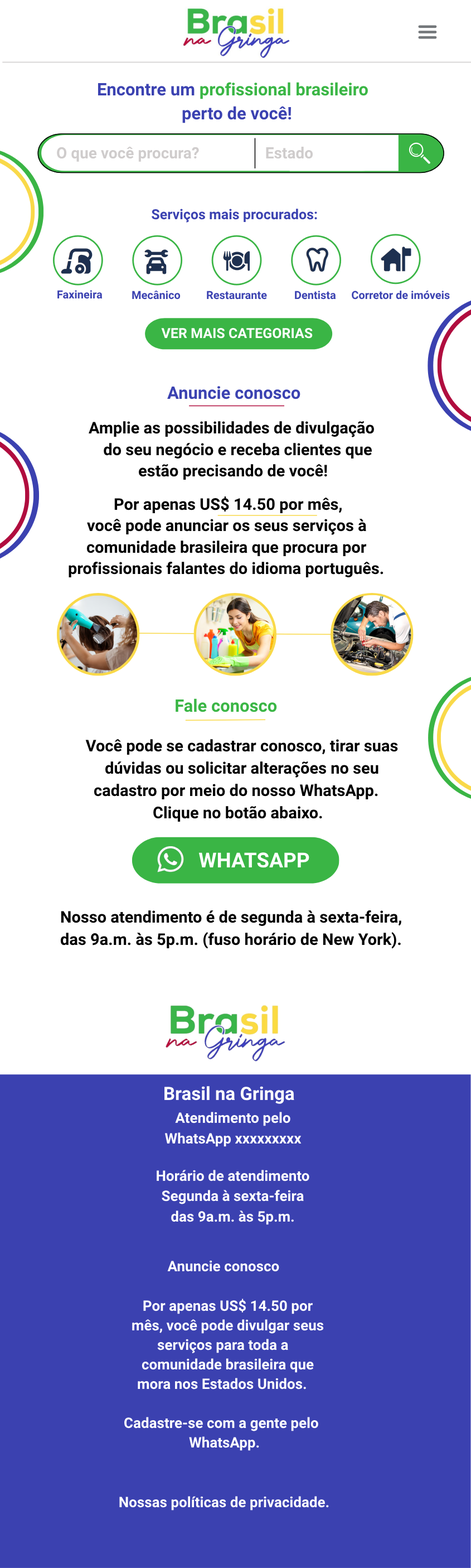
<style>
.page{position:relative;width:471px;height:1568px;background:#ffffff}
.page>*{position:absolute;margin:0}
.t1{font:17.3px/21.4px "Roboto-Bold";color:#3ab645}
.t2{font:17.3px/21.4px "Roboto-Bold";color:#3b42b1}
.t3{font:17.3px/23.9px "Roboto-Bold";color:#3b42b1}
.t4{font:15.6px/23.9px "Roboto-Bold";color:#cfcccc}
.t5{font:15.6px/0.4px "Roboto-Bold";color:#cfcccc}
.t6{font:13.9px "Roboto-Bold";color:#3b42b1}
.t7{font:11.2px "Roboto-Bold";color:#3b42b1}
.t8{font:13.9px "Roboto-Bold";color:#ffffff}
.t9{font:17.3px "Roboto-Bold";color:#3b42b1}
.t10{font:16.2px/21.4px "Roboto-Bold";color:#000000}
.t11{font:16.2px/0.4px "Roboto-Bold";color:#000000}
.t12{font:16.2px "Roboto-Bold";color:#000000}
.t13{font:17.3px "Roboto-Bold";color:#3ab645}
.t14{font:16.2px/22.3px "Roboto-Bold";color:#000000}
.t15{font:20.6px "Roboto-Bold";color:#ffffff}
.t16{font:16.2px/22.1px "Roboto-Bold";color:#000000}
.t17{font:18.4px "Roboto-Bold";color:#ffffff}
.t18{font:14.5px/20.4px "Roboto-Bold";color:#ffffff}
.t19{font:14.5px/22.1px "Roboto-Bold";color:#ffffff}
.t20{font:14.5px "Roboto-Bold";color:#ffffff}
.t21{font:14.5px/19.5px "Roboto-Bold";color:#ffffff}
</style>
<div class="page">
<p class="t1" style="left:98px;top:82px;width:270px;height:41px"><span class="t2">Encontre um </span>profissional brasileiro<span class="t3"><br>perto de você!</span></p>
<p class="t4" style="left:57px;top:147px;width:256px;height:15px">O que você procura?<span class="t5"><br>Estado</span></p>
<p class="t6" style="left:152px;top:209px;width:165px;height:14px">Serviços mais procurados:</p>
<p class="t7" style="left:57px;top:290px;width:46px;height:9px">Faxineira</p>
<p class="t7" style="left:132px;top:291px;width:49px;height:9px">Mecânico</p>
<p class="t7" style="left:207px;top:291px;width:60px;height:9px">Restaurante</p>
<p class="t7" style="left:295px;top:291px;width:41px;height:9px">Dentista</p>
<p class="t7" style="left:352px;top:291px;width:98px;height:9px">Corretor de imóveis</p>
<p class="t8" style="left:161px;top:327px;width:152px;height:12px">VER MAIS CATEGORIAS</p>
<p class="t9" style="left:167px;top:386px;width:134px;height:13px">Anuncie conosco</p>
<p class="t10" style="left:89px;top:421px;width:285px;height:59px"><span class="t11">Amplie as possibilidades de divulgação</span><br>do seu negócio e receba clientes que<br>estão precisando de você!</p>
<p class="t10" style="left:69px;top:496px;width:315px;height:82px"><span class="t12">Por apenas US$ 14.50 por mês, </span><br>você pode anunciar os seus serviços à<br>comunidade brasileira que procura por<br>profissionais falantes do idioma português.</p>
<p class="t13" style="left:176px;top:698px;width:101px;height:14px">Fale conosco</p>
<p class="t14" style="left:85px;top:739px;width:313px;height:83px;text-align:center"><span class="t10">Você pode se cadastrar conosco, tirar suas</span><br>dúvidas ou solicitar alterações no seu<br>cadastro por meio do nosso WhatsApp.<br>Clique no botão abaixo.</p>
<p class="t15" style="left:199px;top:852px;width:111px;height:16px">WHATSAPP</p>
<p class="t16" style="left:60px;top:910px;width:342px;height:39px"><span class="t14">Nosso atendimento é de segunda à sexta-feira,</span><br>das 9a.m. às 5p.m. (fuso horário de New York).</p>
<p class="t17" style="left:165px;top:1086px;width:130px;height:18px">Brasil na Gringa</p>
<p class="t18" style="left:165px;top:1112px;width:137px;height:35px;text-align:center"><span class="t19">Atendimento pelo</span><br>WhatsApp xxxxxxxxx</p>
<p class="t18" style="left:157px;top:1170px;width:153px;height:55px;text-align:center">Horário de atendimento<br>Segunda à sexta-feira<br>das 9a.m. às 5p.m.</p>
<p class="t20" style="left:167px;top:1260px;width:112px;height:12px">Anuncie conosco</p>
<p class="t21" style="left:132px;top:1299px;width:192px;height:91px;text-align:center"><span class="t18">Por apenas US$ 14.50 por</span><br>mês, você pode divulgar seus<br>serviços para toda a<br>comunidade brasileira que<br>mora nos Estados Unidos.</p>
<p class="t21" style="left:124px;top:1417px;width:195px;height:34px">Cadastre-se com a gente pelo<br>WhatsApp.</p>
<p class="t20" style="left:119px;top:1496px;width:210px;height:15px">Nossas políticas de privacidade.</p>
</div>
